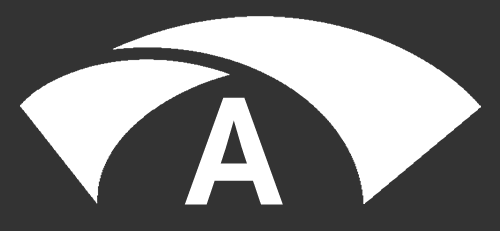
<style>
.page{position:relative;width:500px;height:231px;background:#333333}
.page>*{position:absolute;margin:0}
.t1{font:158px "SukhumvitSet-Bold";color:#ffffff}
</style>
<div class="page">
<p class="t1" style="left:184px;top:97px;width:99px;height:108px">A</p>
</div>
